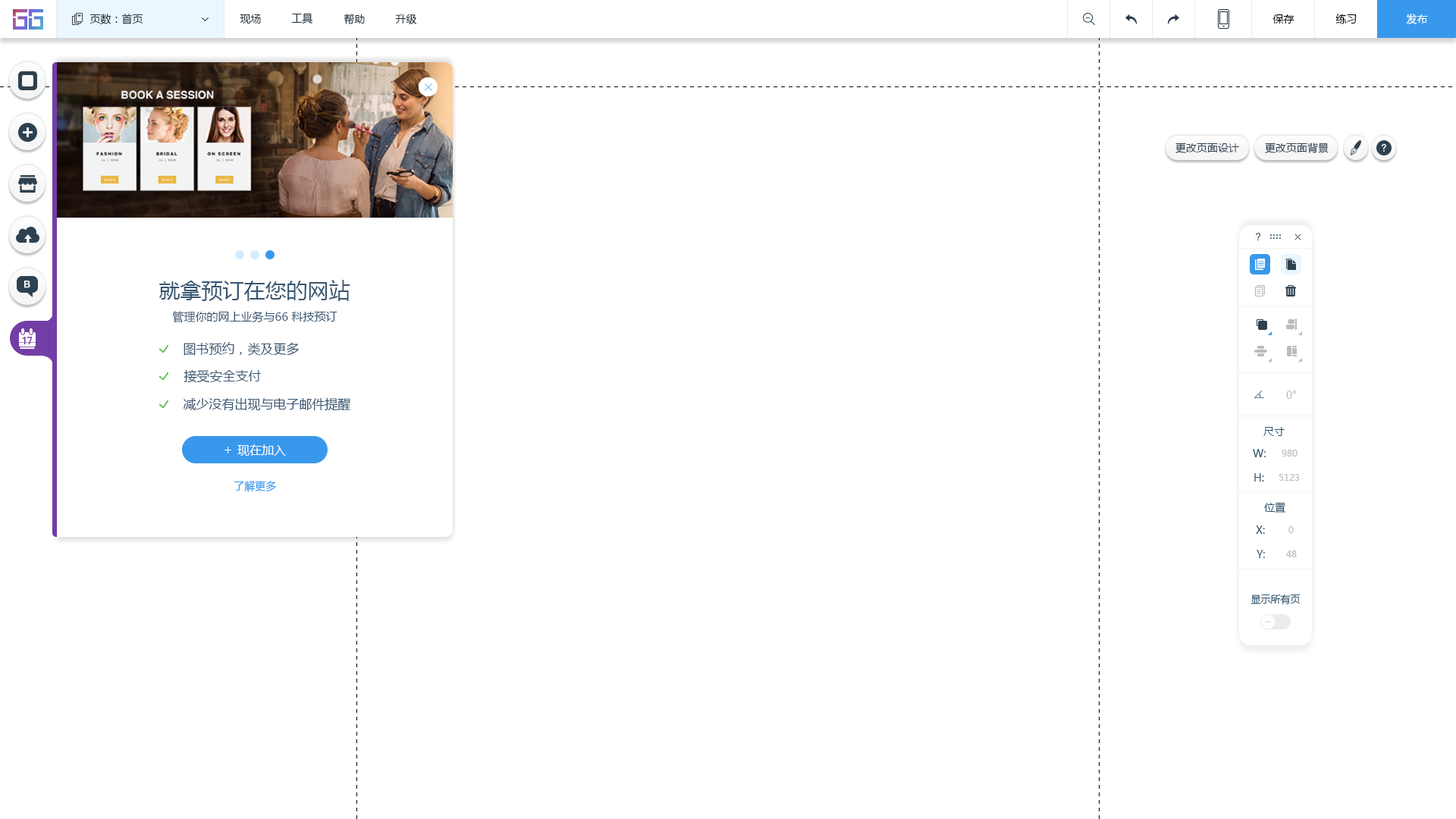
<style>
.page{position:relative;width:1456px;height:819px;background:#ffffff}
.page>*{position:absolute;margin:0}
.t1{font:10.6px "MicrosoftYaHei";color:#20303c}
.t2{font:10.6px "MicrosoftYaHei";color:#000000}
.t3{font:10.6px "MicrosoftYaHei";color:#ffffff}
.t4{font:10.6px "MicrosoftYaHei";color:#2d4150}
.t5{font:21.2px "MicrosoftYaHei";color:#395671}
.t6{font:11.4px "MicrosoftYaHei";color:#395671}
.t7{font:12.9px "MicrosoftYaHei";color:#395671}
.t8{font:10.6px "MicrosoftYaHei";color:#bcbcbc}
.t9{font:10.6px "MicrosoftYaHei";color:#2b5672}
.t10{font:12.1px "MicrosoftYaHei";color:#ffffff}
.t11{font:9.1px "MicrosoftYaHei";color:#bcbcbc}
.t12{font:10.6px "MicrosoftYaHei";color:#3899ec}
.t13{font:9.9px "MicrosoftYaHei";color:#2b5672}
</style>
<div class="page">
<p class="t1" style="left:89px;top:14px;width:54px;height:11px">页数：首页</p>
<p class="t1" style="left:240px;top:14px;width:21px;height:10px">现场</p>
<p class="t1" style="left:291px;top:13px;width:22px;height:11px">工具</p>
<p class="t1" style="left:344px;top:14px;width:21px;height:11px">帮助</p>
<p class="t1" style="left:395px;top:14px;width:22px;height:10px">升级</p>
<p class="t2" style="left:1272px;top:14px;width:22px;height:10px">保存</p>
<p class="t2" style="left:1335px;top:14px;width:22px;height:10px">练习</p>
<p class="t3" style="left:1406px;top:14px;width:22px;height:10px">发布</p>
<p class="t4" style="left:1175px;top:143px;width:64px;height:10px">更改页面设计</p>
<p class="t4" style="left:1265px;top:143px;width:64px;height:10px">更改页面背景</p>
<p class="t5" style="left:159px;top:280px;width:191px;height:21px">就拿预订在您的网站</p>
<p class="t6" style="left:172px;top:311px;width:165px;height:12px">管理你的网上业务与66 科技预订</p>
<p class="t7" style="left:184px;top:342px;width:115px;height:14px">图书预约，类及更多</p>
<p class="t7" style="left:184px;top:369px;width:77px;height:14px">接受安全支付</p>
<p class="t7" style="left:184px;top:397px;width:166px;height:14px">减少没有出现与电子邮件提醒</p>
<p class="t8" style="left:1286px;top:391px;width:11px;height:8px">0°</p>
<p class="t9" style="left:1263px;top:427px;width:22px;height:9px">尺寸</p>
<p class="t10" style="left:237px;top:444px;width:49px;height:12px">现在加入</p>
<p class="t9" style="left:1253px;top:449px;width:13px;height:8px">W:</p>
<p class="t11" style="left:1282px;top:450px;width:15px;height:7px">980</p>
<p class="t9" style="left:1254px;top:473px;width:10px;height:9px">H:</p>
<p class="t11" style="left:1279px;top:474px;width:21px;height:7px">5123</p>
<p class="t12" style="left:234px;top:481px;width:42px;height:11px">了解更多</p>
<p class="t9" style="left:1264px;top:502px;width:22px;height:11px">位置</p>
<p class="t9" style="left:1256px;top:526px;width:9px;height:8px">X:</p>
<p class="t11" style="left:1288px;top:526px;width:6px;height:7px">0</p>
<p class="t9" style="left:1257px;top:550px;width:8px;height:8px">Y:</p>
<p class="t11" style="left:1286px;top:551px;width:11px;height:6px">48</p>
<p class="t13" style="left:1250px;top:594px;width:51px;height:10px">显示所有页</p>
</div>
